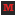
<style>
.page{position:relative;width:16px;height:16px;background:#272727}
.page>*{position:absolute;margin:0}
.t1{font:9.5px "Rockwell-Bold";color:#e22424}
</style>
<div class="page">
<p class="t1" style="left:3px;top:4px;width:11px;height:7px">M</p>
</div>
